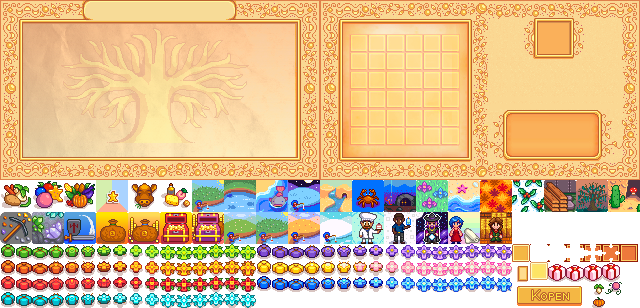
<style>
.page{position:relative;width:640px;height:308px}
.page>*{position:absolute;margin:0}
.t1{font:13px "ArialMT";color:#ffe43e;font-variant:small-caps}
</style>
<div class="page">
<p class="t1" style="left:532px;top:290px;width:37px;height:10px">Kopen</p>
</div>
